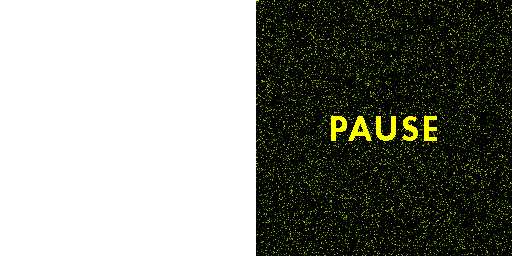
<style>
.page{position:relative;width:512px;height:256px;background:#ffffff}
.page>*{position:absolute;margin:0}
.t1{font:36px "FuturaPT-Heavy";letter-spacing:0.05em;color:#ffff00}
</style>
<div class="page">
<p class="t1" style="left:331px;top:116px;width:106px;height:25px">PAUSE</p>
</div>
